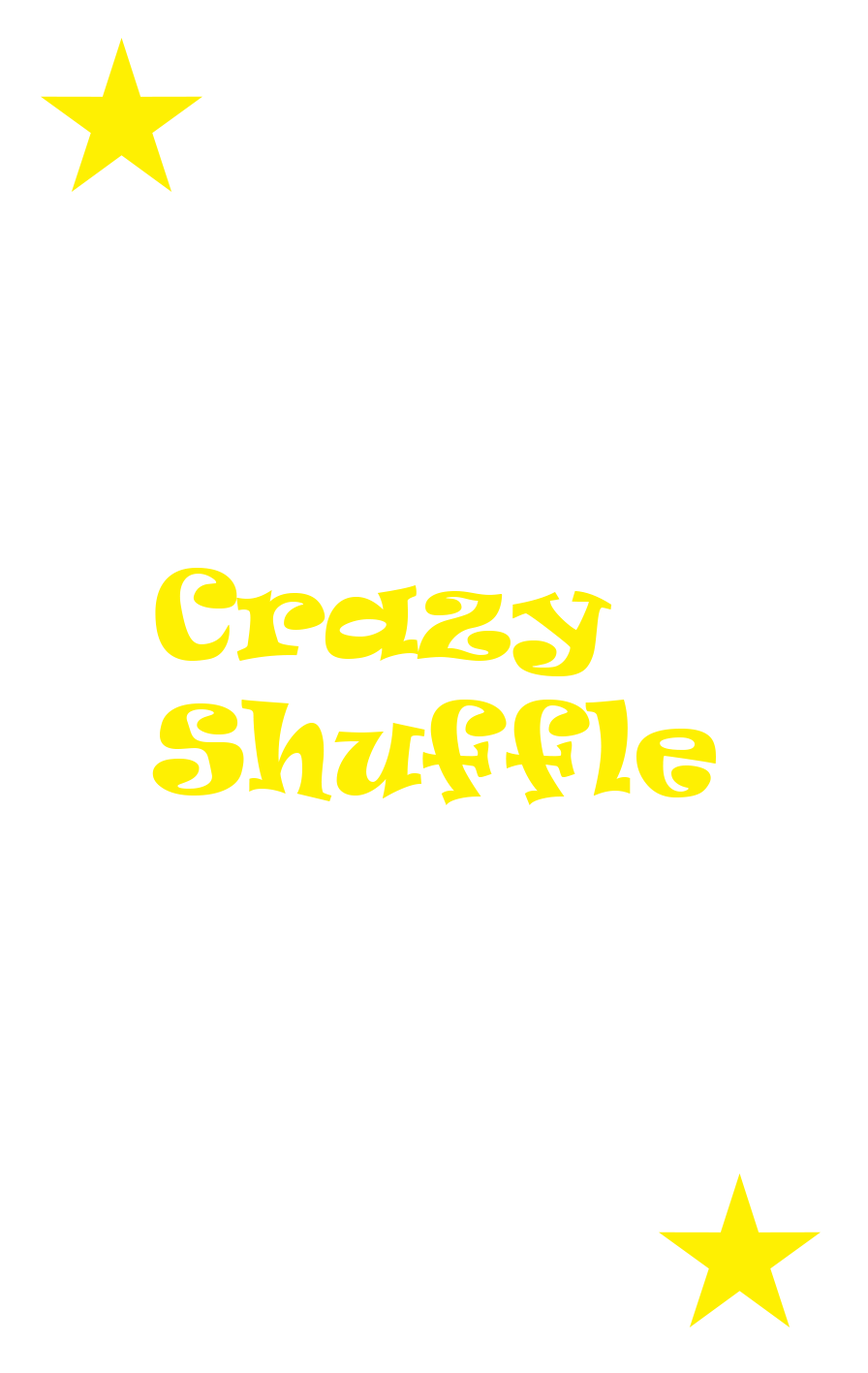
<style>
.page{position:relative;width:868px;height:1373px;background:#ffffff}
.page>*{position:absolute;margin:0}
.t1{font:113.1px "Ravie";color:#fef002}
</style>
<div class="page">
<p class="t1" style="left:152px;top:568px;width:564px;height:237px">Crazy <br>Shuffle</p>
</div>
